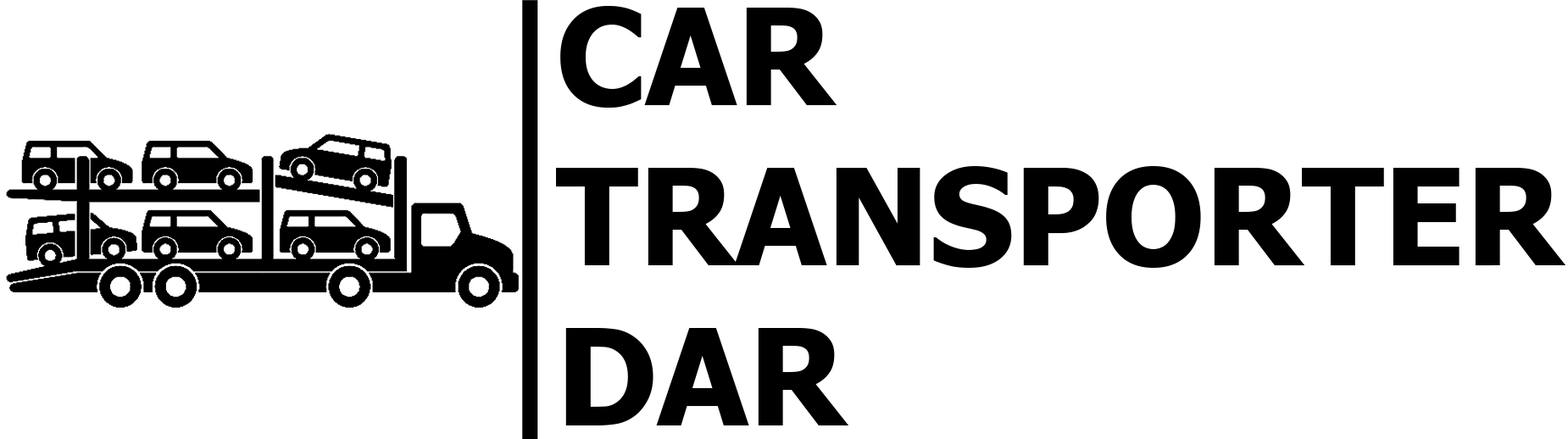
<style>
.page{position:relative;width:1568px;height:439px;background:#ffffff}
.page>*{position:absolute;margin:0}
.t1{font:133.6px "Tahoma-Bold";color:#000000}
</style>
<div class="page">
<p class="t1" style="left:556px;top:6px;width:1009px;height:419px">CAR <br>TRANSPORTER<br>DAR</p>
</div>
